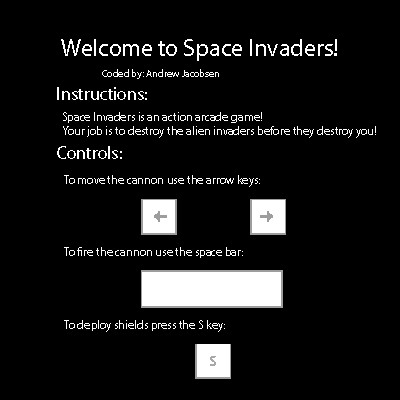
<style>
.page{position:relative;width:400px;height:400px;background:#000000}
.page>*{position:absolute;margin:0}
.t1{font:24px "MyriadPro-Regular";color:#ffffff}
.t2{font:10px "MyriadPro-Regular";color:#ffffff}
.t3{font:18px "MyriadPro-Regular";color:#ffffff}
.t4{font:12px "MyriadPro-Regular";color:#ffffff}
.t5{font:14px "MyriadPro-Bold";color:#a8a8a8}
</style>
<div class="page">
<p class="t1" style="left:61px;top:39px;width:276px;height:22px">Welcome to Space Invaders!</p>
<p class="t2" style="left:102px;top:69px;width:117px;height:10px">Coded by: Andrew Jacobsen</p>
<p class="t3" style="left:57px;top:87px;width:90px;height:13px">Instructions:</p>
<p class="t4" style="left:63px;top:112px;width:313px;height:26px">Space Invaders is an action arcade game!<br>Your job is to destroy the alien invaders before they destroy you!</p>
<p class="t3" style="left:57px;top:146px;width:65px;height:13px">Controls:</p>
<p class="t4" style="left:64px;top:175px;width:196px;height:12px">To move the cannon use the arrow keys:</p>
<p class="t4" style="left:64px;top:247px;width:179px;height:11px">To fire the cannon use the space bar:</p>
<p class="t4" style="left:64px;top:320px;width:161px;height:12px">To deploy shields press the S key:</p>
<p class="t5" style="left:210px;top:356px;width:6px;height:10px">S</p>
</div>
